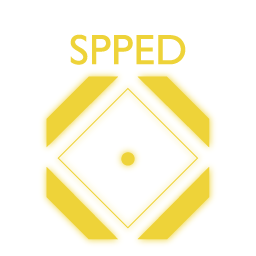
<style>
.page{position:relative;width:256px;height:256px;background:#ffffff}
.page>*{position:absolute;margin:0}
.t1{font:42.7px "GillSansMT";letter-spacing:0.01em;color:#eed339}
</style>
<div class="page">
<p class="t1" style="left:70px;top:34px;width:116px;height:31px">SPPED</p>
</div>
